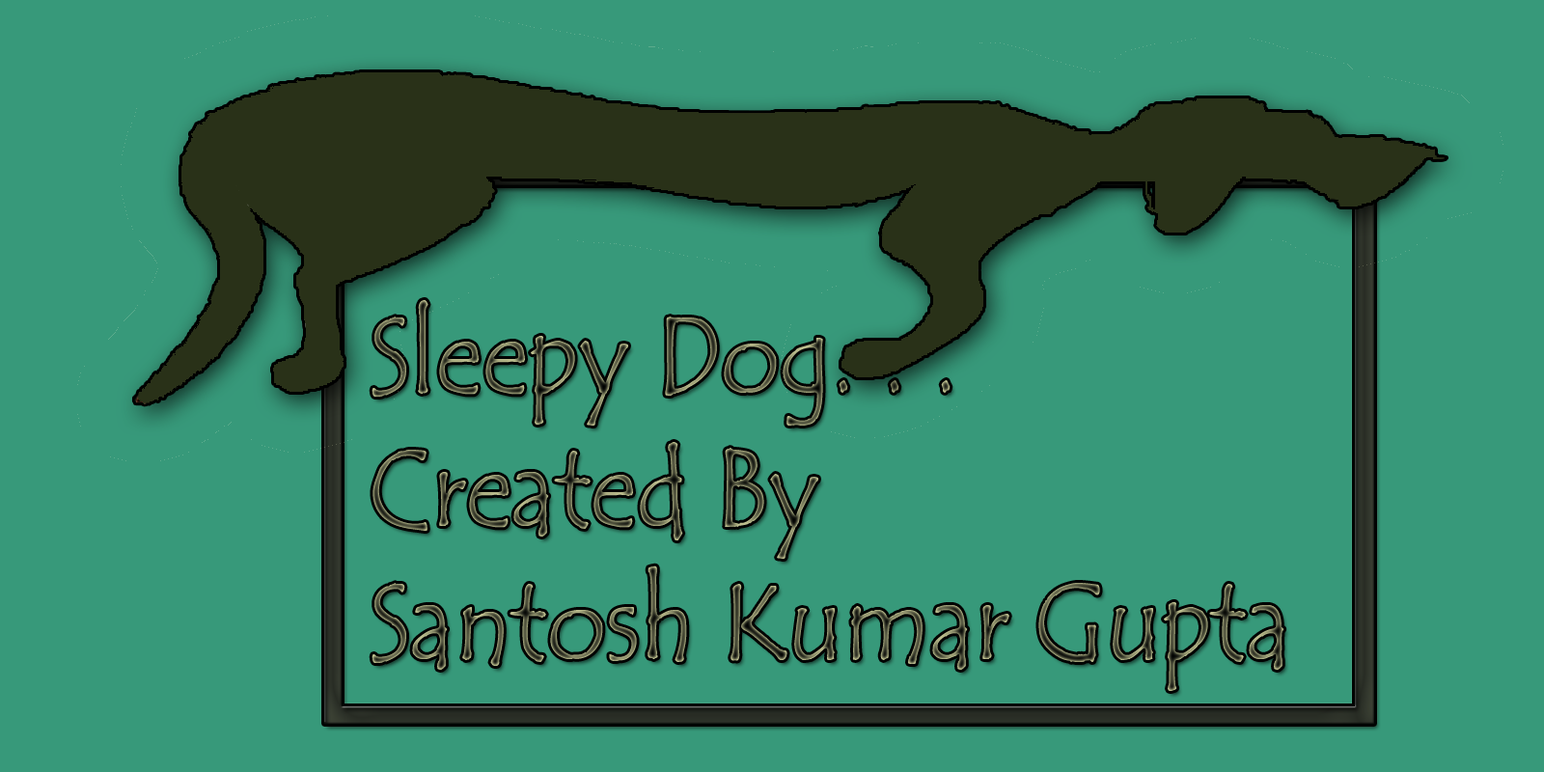
<style>
.page{position:relative;width:1544px;height:772px;background:#37997a}
.page>*{position:absolute;margin:0}
.t1{font:111.3px "TempusSansITC";scale:0.91 1}
</style>
<div class="page">
<p class="t1" style="left:372px;top:300px;width:913px;height:391px">Sleepy Dog. . .<br>Created By<br>Santosh Kumar Gupta</p>
</div>
